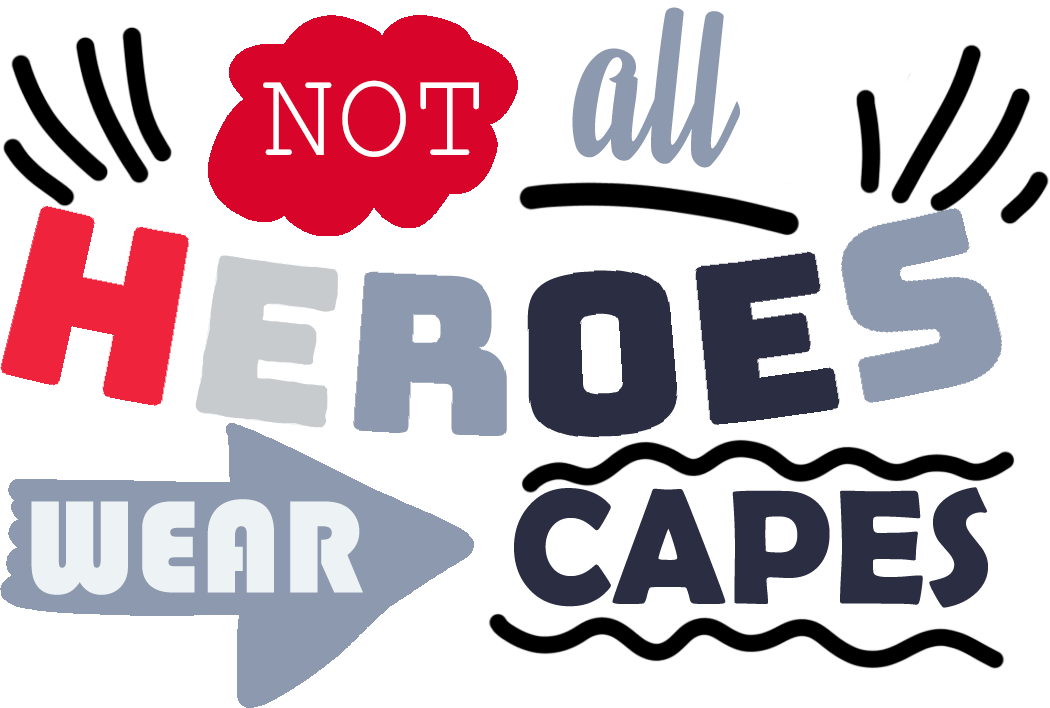
<style>
.page{position:relative;width:1050px;height:708px;background:#ffffff}
.page>*{position:absolute;margin:0}
.t1{font:223.1px "BeautyMountainsPersonalUse";color:#8d99ae}
.t2{font:126.4px "CourierNewPSMT";color:#ffffff}
.t3{font:164.3px "BerlinSansFBDemi-Bold";color:#2b2d42}
.t4{font:136.2px "Bauhaus93";color:#edf2f4}
</style>
<div class="page">
<p class="t1" style="left:572px;top:7px;width:168px;height:161px;rotate:5deg">all</p>
<p class="t2" style="left:263px;top:80px;width:216px;height:77px">NOT</p>
<p class="t3" style="left:514px;top:487px;width:474px;height:121px">CAPES</p>
<p class="t4" style="left:31px;top:499px;width:332px;height:96px">WEAR</p>
</div>
